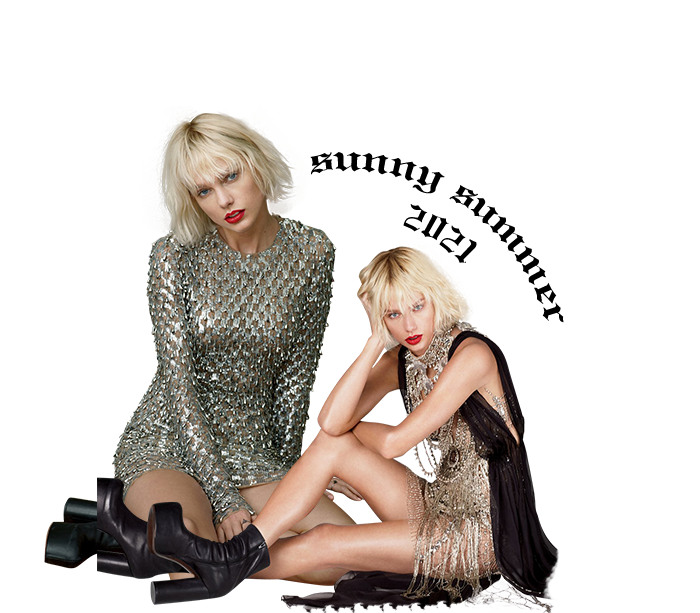
<style>
.page{position:relative;width:700px;height:613px;background:#ffffff}
.page>*{position:absolute;margin:0}
.t1{font:37.5px "EngraversOldEnglishNormal";color:#000000}
</style>
<div class="page">
<p class="t1" style="left:310px;top:152px;width:254px;height:171px;rotate:35deg">sunny summer <br>         2021</p>
</div>
